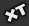
<style>
.page{position:relative;width:29px;height:26px;background:#333333}
.page>*{position:absolute;margin:0}
.t1{font:17px "LithosPro-Black";color:#ffffff}
</style>
<div class="page">
<p class="t1" style="left:5px;top:3px;width:21px;height:19px;rotate:-25deg;opacity:0.9">xt</p>
</div>
